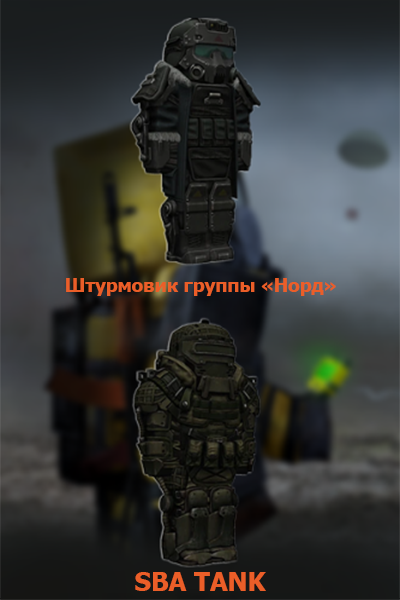
<style>
.page{position:relative;width:400px;height:600px}
.page>*{position:absolute;margin:0}
.t1{font:18.7px "Tahoma-Bold";color:#eb5e28}
.t2{font:25.9px "Tahoma-Bold";color:#eb5e28}
</style>
<div class="page">
<p class="t1" style="left:66px;top:278px;width:270px;height:18px">Штурмовик группы «Норд»</p>
<p class="t2" style="left:135px;top:572px;width:131px;height:19px">SBA TANK</p>
</div>
